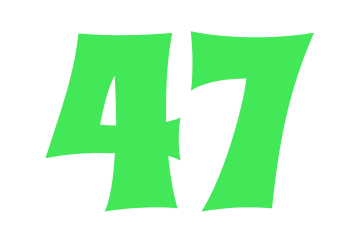
<style>
.page{position:relative;width:354px;height:236px;background:#ffffff}
.page>*{position:absolute;margin:0}
.t1{font:250px "SpicyRice-Regular";color:#43e858}
</style>
<div class="page">
<p class="t1" style="left:45px;top:31px;width:269px;height:181px">47</p>
</div>
